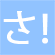
<style>
.page{position:relative;width:55px;height:55px;background:#91c3ff}
.page>*{position:absolute;margin:0}
.t1{font:37.5px "KozGoPr6N-Regular";color:#ffffff;font-weight:bold}
</style>
<div class="page">
<p class="t1" style="left:3px;top:11px;width:45px;height:33px">さ！</p>
</div>
